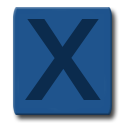
<style>
.page{position:relative;width:130px;height:131px;background:#1f548d}
.page>*{position:absolute;margin:0}
.t1{font:156.4px "ArialMT";letter-spacing:-0.005em;color:#0b2b4d}
</style>
<div class="page">
<p class="t1" style="left:25px;top:19px;width:76px;height:81px">x</p>
</div>
